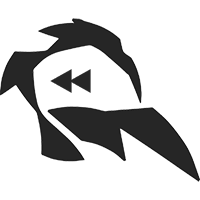
<style>
.page{position:relative;width:200px;height:200px;background:#ffffff}
.page>*{position:absolute;margin:0}
.t1{font:30px "SegoeUI-Light";color:#262626}
</style>
<div class="page">
<p class="t1" style="left:50px;top:69px;width:22px;height:24px;rotate:-90deg">▲</p>
<p class="t1" style="left:69px;top:69px;width:22px;height:24px;rotate:-90deg">▲</p>
</div>
